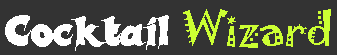
<style>
.page{position:relative;width:337px;height:55px;background:#333333}
.page>*{position:absolute;margin:0}
.t1{font:41.7px "Candles";color:#ffffff}
.t2{font:41.7px "Jokerman-Regular";color:#ccff33}
</style>
<div class="page">
<p class="t1" style="left:5px;top:15px;width:164px;height:36px">Cocktail</p>
<p class="t2" style="left:183px;top:9px;width:148px;height:39px">Wizard</p>
</div>
